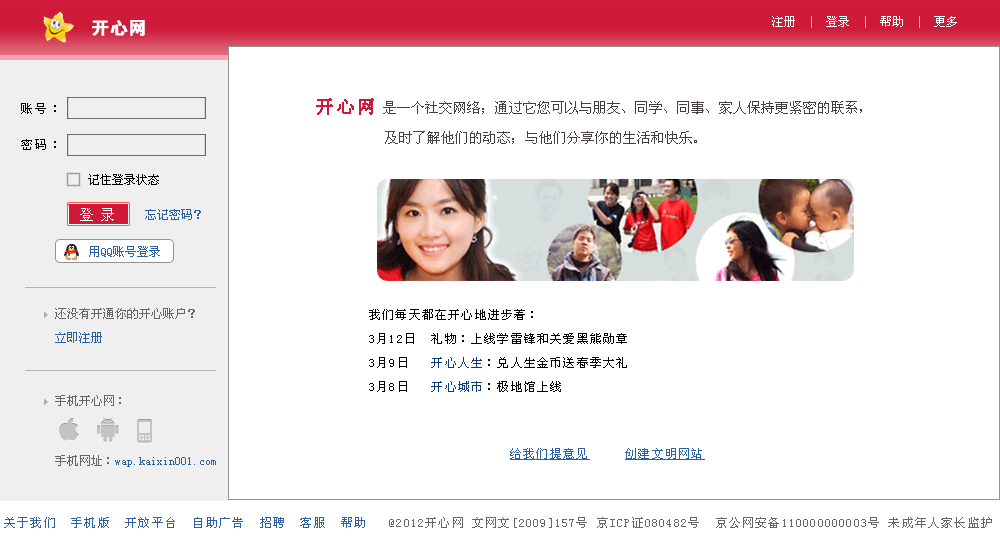
<style>
.page{position:relative;width:1000px;height:551px;background:#ffffff}
.page>*{position:absolute;margin:0}
.t1{font:12px "SimSun";color:#ffffff}
.t2{font:12px "SimSun";color:#dbb9b9}
.t3{font:18px "FZDHTJW--GB1-0";color:#ffffff;font-weight:bold}
.t4{font:14px/30px "SimSun";color:#463f3f}
.t5{font:18px/30px "SimSun";letter-spacing:0.1em;color:#cd1b39;font-weight:bold}
.t6{font:12px/36px "SimSun";letter-spacing:0.2em;color:#020000}
.t7{font:12px "SimSun";color:#020000}
.t8{font:14px "SimSun";color:#fefdfd}
.t9{font:12px "SimSun";color:#2b62a5}
.t10{font:12px/24px "SimSun";color:#666666}
.t11{font:12px/24px "SimSun";color:#2b62a5}
.t12{font:12px/24px "SimSun";letter-spacing:0.1em;color:#030000}
.t13{font:12px/24px "SimSun";letter-spacing:0.1em;color:#0b3d7c}
.t14{font:12px/60px "SimSun";color:#2b62a5}
.t15{font:12px/60px "SimSun";color:#666666}
.t16{font:12px "SimSun";letter-spacing:0.1em;color:#2b62a5;text-decoration:underline}
.t17{font:12px "SimSun";letter-spacing:0.1em;color:#666666}
.t18{font:12px "SimSun";letter-spacing:0.1em;color:#2b62a5}
</style>
<div class="page">
<p class="t1" style="left:772px;top:16px;width:185px;height:12px">注册  <span class="t2">|</span>  登录  <span class="t2">|</span>  帮助  <span class="t2">|</span>  更多</p>
<p class="t3" style="left:92px;top:20px;width:53px;height:16px">开心网</p>
<p class="t4" style="left:316px;top:98px;width:546px;height:46px"><span class="t5">开心网 </span>是一个社交网络；通过它您可以与朋友、同学、同事、家人保持更紧密的联系，<br>          及时了解他们的动态；与他们分享你的生活和快乐。</p>
<p class="t6" style="left:21px;top:103px;width:35px;height:47px">账号：<br>密码：</p>
<p class="t7" style="left:88px;top:174px;width:71px;height:11px">记住登录状态</p>
<p class="t8" style="left:80px;top:208px;width:34px;height:13px">登 录</p>
<p class="t9" style="left:145px;top:209px;width:56px;height:11px">忘记密码？</p>
<p class="t9" style="left:89px;top:246px;width:71px;height:11px">用QQ账号登录</p>
<p class="t10" style="left:55px;top:308px;width:140px;height:35px">还没有开通你的开心账户？<br><span class="t11">立即注册</span></p>
<p class="t12" style="left:369px;top:309px;width:258px;height:83px">我们每天都在开心地进步着：<br>3月12日  礼物：上线学雷锋和关爱黑熊勋章<br>3月9日   <span class="t13">开心人生</span>：兑人生金币送春季大礼<br>3月8日   <span class="t13">开心城市</span>：极地馆上线</p>
<p class="t14" style="left:55px;top:395px;width:161px;height:72px"><span class="t15">手机开心网：<br>手机网址：</span>wap.kaixin001.com</p>
<p class="t16" style="left:510px;top:448px;width:195px;height:12px">给我们提意见     创建文明网站</p>
<p class="t17" style="left:4px;top:517px;width:988px;height:11px"><span class="t18">关于我们  手机版  开放平台  自助广告  招聘  客服  帮助   </span>@2012开心网 文网文[2009]157号 京ICP证080482号  京公网安备110000000003号 未成年人家长监护</p>
</div>
